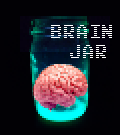
<style>
.page{position:relative;width:120px;height:135px;background:#020105}
.page>*{position:absolute;margin:0}
.t1{font:16px/20px "ArcadeInterlaced";letter-spacing:0.075em;color:#ffffff;scale:0.75 1}
</style>
<div class="page">
<p class="t1" style="left:51px;top:25px;width:61px;height:33px;text-align:center">Brain<br> Jar</p>
</div>
